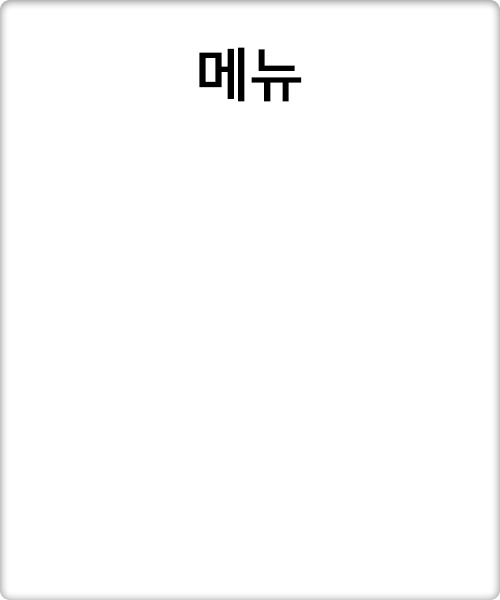
<style>
.page{position:relative;width:500px;height:600px;background:#ffffff}
.page>*{position:absolute;margin:0}
.t1{font:58px "NanumSquareB";color:#000000;font-weight:bold}
</style>
<div class="page">
<p class="t1" style="left:199px;top:47px;width:103px;height:55px">메뉴</p>
</div>
